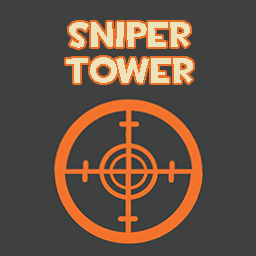
<style>
.page{position:relative;width:256px;height:256px;background:#3f4040}
.page>*{position:absolute;margin:0}
.t1{font:36px/36px "TF2Build";color:#ede3bb}
</style>
<div class="page">
<p class="t1" style="left:66px;top:22px;width:127px;height:61px;text-align:center">Sniper<br>Tower</p>
</div>
